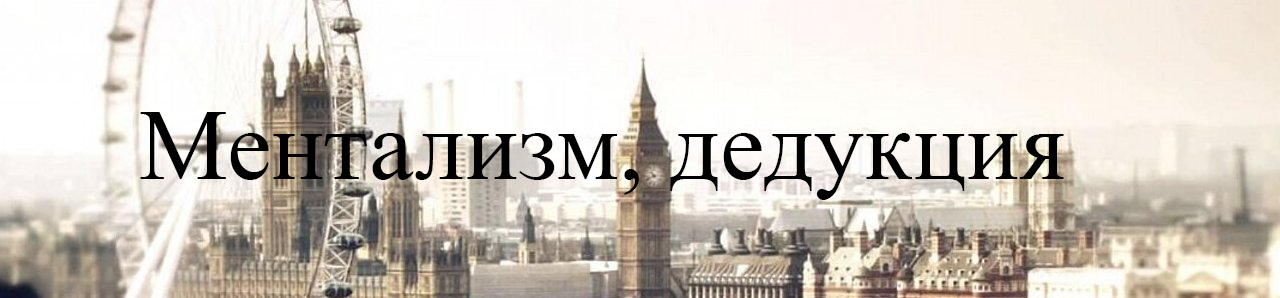
<style>
.page{position:relative;width:1280px;height:298px}
.page>*{position:absolute;margin:0}
.t1{font:100px "TimesNewRomanPSMT";color:#000000}
</style>
<div class="page">
<p class="t1" style="left:140px;top:112px;width:924px;height:88px">Ментализм, дедукция</p>
</div>
